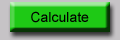
<style>
.page{position:relative;width:120px;height:40px;background:#1ec915}
.page>*{position:absolute;margin:0}
.t1{font:14px "ArialMT";color:#000000}
</style>
<div class="page">
<p class="t1" style="left:31px;top:11px;width:58px;height:12px">Calculate</p>
</div>
